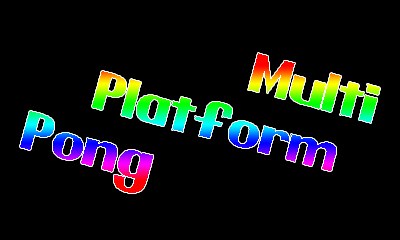
<style>
.page{position:relative;width:400px;height:240px;background:#000000}
.page>*{position:absolute;margin:0}
.t1{font:48px "Pretendo"}
</style>
<div class="page">
<p class="t1" style="left:20px;top:53px;width:360px;height:140px;text-align:right;rotate:15deg">Multi <br>    Platform    <br>       Pong</p>
</div>
